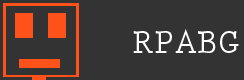
<style>
.page{position:relative;width:244px;height:80px;background:#333333}
.page>*{position:absolute;margin:0}
.t1{font:36px "PrestigeEliteStd-Bd";color:#ffffff}
</style>
<div class="page">
<p class="t1" style="left:133px;top:29px;width:106px;height:24px">RPABG</p>
</div>
